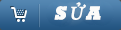
<style>
.page{position:relative;width:121px;height:30px}
.page>*{position:absolute;margin:0}
.t1{font:18.7px "Rockwell-ExtraBold";letter-spacing:0.14em;color:#fbfbfa;font-weight:bold;font-style:italic}
.t2{font:18.7px "MinionPro-Regular";letter-spacing:0.14em;color:#fbfbfa;font-weight:bold;font-style:italic}
</style>
<div class="page">
<p class="t1" style="left:54px;top:2px;width:47px;height:18px">S<span class="t2">Ử</span>A</p>
</div>
